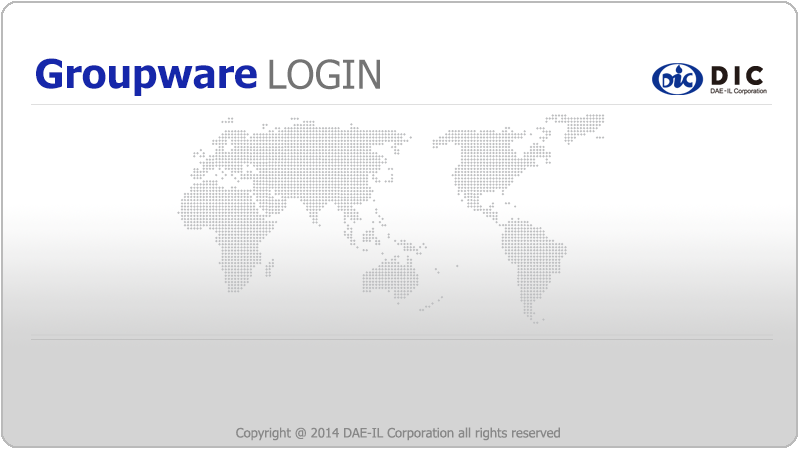
<style>
.page{position:relative;width:800px;height:450px;background:#ffffff}
.page>*{position:absolute;margin:0}
.t1{font:40px "Tahoma-Bold";color:#1627aa}
.t2{font:40px "Tahoma";color:#747474}
.t3{font:13px "Tahoma";color:#888888}
</style>
<div class="page">
<p class="t1" style="left:36px;top:58px;width:221px;height:38px">Groupware</p>
<p class="t2" style="left:269px;top:59px;width:111px;height:31px">LOGIN</p>
<p class="t3" style="left:236px;top:427px;width:324px;height:14px">Copyright @ 2014 DAE-IL Corporation all rights reserved</p>
</div>
